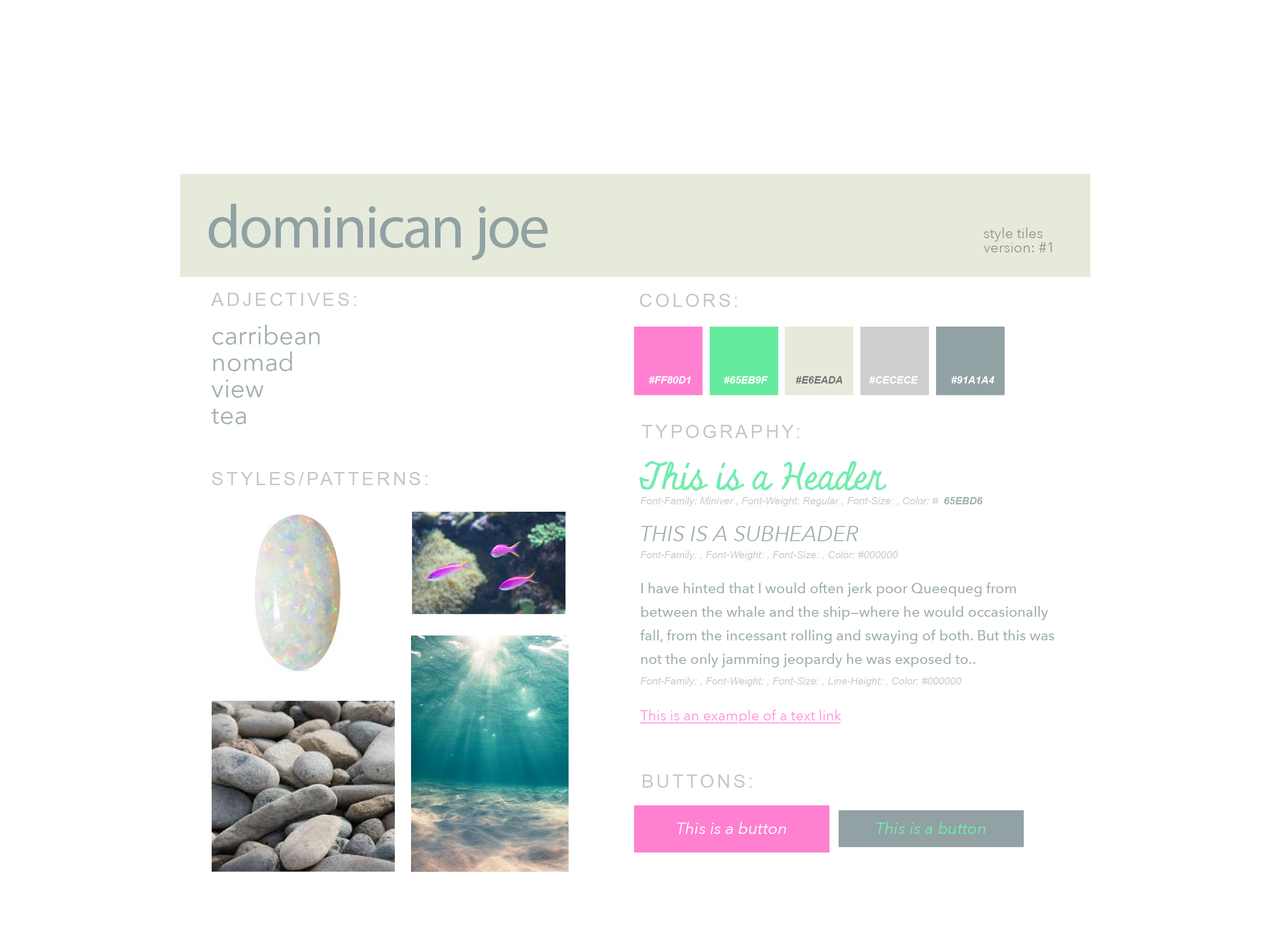
<style>
.page{position:relative;width:1271px;height:938px;background:#ffffff}
.page>*{position:absolute;margin:0}
.t1{font:61.4px "MyriadPro-Regular";letter-spacing:-0.03em;color:#91a1a4}
.t2{font:14.3px "AvenirNext-Regular";color:#989898}
.t3{font:18.4px "ArialMT";letter-spacing:0.149em;color:#c7c7c7}
.t4{font:18.4px "ArialMT";color:#c7c7c7}
.t5{font:25.6px "AvenirNext-Regular";color:#a2b0b3}
.t6{font:25.6px "AvenirNext-Regular";letter-spacing:-0.005em;color:#a2b0b3}
.t7{font:10.2px "Arial-BoldItalicMT";color:#ffffff}
.t8{font:10.2px "Arial-BoldItalicMT";color:#777474}
.t9{font:18.4px "ArialMT";letter-spacing:0.094em;color:#c7c7c7}
.t10{font:36.8px "Miniver";letter-spacing:-0.027em;color:#73ecaf}
.t11{font:36.8px "Miniver";letter-spacing:-0.028em;color:#73ecaf}
.t12{font:36.8px "Miniver";color:#73ecaf}
.t13{font:18.4px "ArialMT";letter-spacing:0.075em;color:#c7c7c7}
.t14{font:10.2px "Arial-ItalicMT";color:#cfcfcf}
.t15{font:10.2px "Arial-ItalicMT";letter-spacing:-0.018em;color:#cfcfcf}
.t16{font:10.2px "Arial-BoldItalicMT";color:#a2b0b3}
.t17{font:21.5px "AvenirNext-Italic";color:#a2b0b3}
.t18{font:14.3px "AvenirNext-Medium";color:#a2b0b3}
.t19{font:14.3px "AvenirNext-Medium";letter-spacing:-0.009em;color:#a2b0b3}
.t20{font:14.3px "AvenirNext-Medium";letter-spacing:-0.015em;color:#a2b0b3}
.t21{font:14.3px "AvenirNext-Medium";letter-spacing:-0.018em;color:#a2b0b3}
.t22{font:14.3px "AvenirNext-Medium";letter-spacing:-0.017em;color:#a2b0b3}
.t23{font:14.3px "AvenirNext-Medium";letter-spacing:-0.03em;color:#a2b0b3}
.t24{font:14.3px "AvenirNext-Medium";letter-spacing:0.023em;color:#a2b0b3}
.t25{font:14.3px "AvenirNext-Medium";letter-spacing:-0.029em;color:#a2b0b3}
.t26{font:14.3px "AvenirNext-Medium";letter-spacing:-0.011em;color:#a2b0b3}
.t27{font:14.3px "AvenirNext-Regular";color:#ff98da}
.t28{font:14.3px "AvenirNext-Regular";letter-spacing:-0.017em;color:#ff98da}
.t29{font:14.3px "AvenirNext-Regular";letter-spacing:-0.005em;color:#ff98da}
.t30{font:14.3px "AvenirNext-Regular";letter-spacing:0.023em;color:#ff98da}
.t31{font:18.4px "ArialMT";letter-spacing:0.131em;color:#c7c7c7}
.t32{font:16.4px "AvenirNext-Italic";color:#ffffff}
.t33{font:16.4px "AvenirNext-Italic";color:#73ecaf}
</style>
<div class="page">
<p class="t1" style="left:209px;top:204px;width:339px;height:56px">dominican joe</p>
<p class="t2" style="left:984px;top:227px;width:59px;height:15px">style tiles</p>
<p class="t2" style="left:984px;top:242px;width:68px;height:10px">version: #1</p>
<p class="t3" style="left:211px;top:293px;width:146px;height:13px">ADJECTIVES<span class="t4">:</span></p>
<p class="t3" style="left:639px;top:294px;width:98px;height:13px">COLORS<span class="t4">:</span></p>
<p class="t5" style="left:212px;top:325px;width:108px;height:20px">carrib<span class="t6">e</span>an</p>
<p class="t5" style="left:213px;top:351px;width:79px;height:20px">nomad</p>
<p class="t7" style="left:649px;top:376px;width:42px;height:8px">#FF80D1</p>
<p class="t7" style="left:724px;top:376px;width:44px;height:8px">#65EB9F</p>
<p class="t8" style="left:796px;top:376px;width:46px;height:8px">#E6EADA</p>
<p class="t7" style="left:869px;top:376px;width:49px;height:8px">#CECECE</p>
<p class="t7" style="left:951px;top:376px;width:44px;height:8px">#91A1A4</p>
<p class="t5" style="left:211px;top:380px;width:53px;height:18px">view</p>
<p class="t5" style="left:211px;top:409px;width:35px;height:15px">t<span class="t6">e</span>a</p>
<p class="t3" style="left:641px;top:425px;width:159px;height:13px">TYPOGRAPH<span class="t9">Y</span><span class="t4">:</span></p>
<p class="t10" style="left:639px;top:461px;width:248px;height:30px">T<span class="t11">h</span>i<span class="t11">s</span> i<span class="t11">s</span> a <span class="t11">H</span>eade<span class="t12">r</span></p>
<p class="t3" style="left:212px;top:472px;width:216px;height:13px">STYLES/<span class="t13">PA</span>TTERNS<span class="t4">:</span></p>
<p class="t14" style="left:640px;top:497px;width:299px;height:9px">Font-Family: Miniver , Font-<span class="t15">W</span>eight: Regular , Font-Size: , Color: #</p>
<p class="t16" style="left:944px;top:497px;width:39px;height:7px">65EBD6</p>
<p class="t17" style="left:641px;top:526px;width:218px;height:15px">THIS IS A SUBHEADER</p>
<p class="t14" style="left:640px;top:551px;width:258px;height:9px">Font-Family: , Font-<span class="t15">W</span>eight: , Font-Size: , Color: #000000</p>
<p class="t18" style="left:641px;top:583px;width:375px;height:14px">I have hinted th<span class="t19">a</span>t I would o<span class="t20">f</span>ten jerk poor Queequeg f<span class="t21">r</span>om</p>
<p class="t18" style="left:641px;top:606px;width:407px;height:14px">between the whale and the ship—whe<span class="t22">r</span>e he would occasionally</p>
<p class="t18" style="left:640px;top:630px;width:415px;height:14px">fall<span class="t23">,</span> f<span class="t22">r</span>om the incessant <span class="t22">r</span>olling and swaying o<span class="t24">f</span> both<span class="t25">.</span> But this was</p>
<p class="t18" style="left:641px;top:653px;width:334px;height:14px">not the only jamming jeopa<span class="t22">r</span>dy he was <span class="t19">e</span>xposed t<span class="t26">o</span>..</p>
<p class="t14" style="left:640px;top:677px;width:322px;height:10px">Font-Family: , Font-<span class="t15">W</span>eight: , Font-Size: , Line-Height: , Color: #000000</p>
<p class="t27" style="left:640px;top:709px;width:201px;height:15px"><span class="t28">T</span>his is an <span class="t29">e</span>xample o<span class="t30">f</span> a t<span class="t29">e</span>xt link</p>
<p class="t3" style="left:642px;top:775px;width:110px;height:13px">BUT<span class="t31">T</span>ONS<span class="t4">:</span></p>
<p class="t32" style="left:677px;top:822px;width:109px;height:12px">This is a button</p>
<p class="t33" style="left:876px;top:822px;width:110px;height:12px">This is a button</p>
</div>
